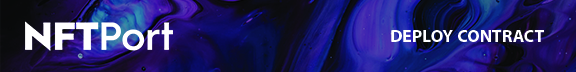
<style>
.page{position:relative;width:576px;height:72px}
.page>*{position:absolute;margin:0}
.t1{font:17.8px "MyriadPro-Bold";color:#ffffff}
</style>
<div class="page">
<p class="t1" style="left:391px;top:30px;width:153px;height:12px">DEPLOY CONTRACT</p>
</div>
